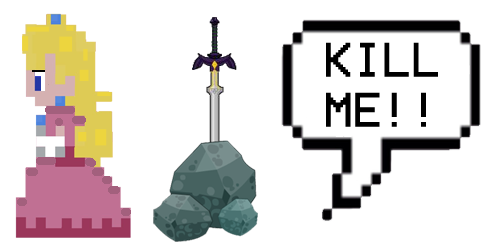
<style>
.page{position:relative;width:500px;height:250px;background:#ffffff}
.page>*{position:absolute;margin:0}
.t1{font:50px/50px "VCROSDMono";color:#000000}
</style>
<div class="page">
<p class="t1" style="left:326px;top:42px;width:112px;height:85px">KILL<br>ME!!</p>
</div>
